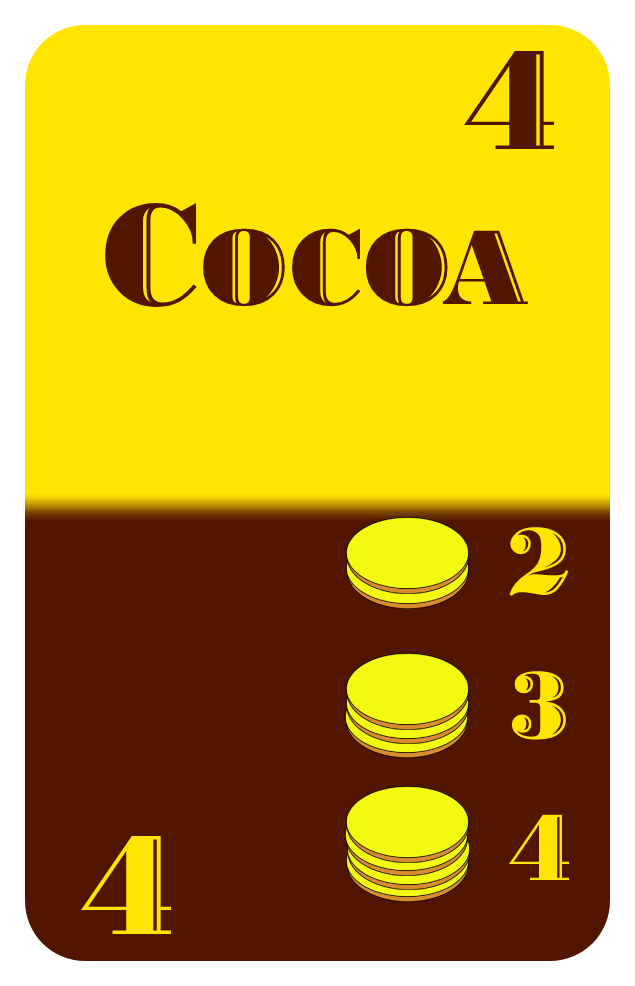
<style>
.page{position:relative;width:635px;height:986px;background:#ffe500}
.page>*{position:absolute;margin:0}
.t1{font:150px "BodoniHighlightICG";color:#521500}
.t2{font:112px "BodoniHighlightICG";color:#521500}
.t3{font:100px "BodoniHighlightICG";color:#ffe500}
.t4{font:150px "BodoniHighlightICG";color:#ffe500}
</style>
<div class="page">
<p class="t1" style="left:464px;top:51px;width:90px;height:98px">4</p>
<p class="t2" style="left:105px;top:203px;width:423px;height:104px"><span class="t1">C</span>OCOA</p>
<p class="t3" style="left:509px;top:527px;width:60px;height:69px">2</p>
<p class="t3" style="left:511px;top:671px;width:55px;height:69px">3</p>
<p class="t3" style="left:508px;top:814px;width:61px;height:66px">4</p>
<p class="t4" style="left:81px;top:836px;width:90px;height:98px">4</p>
</div>
